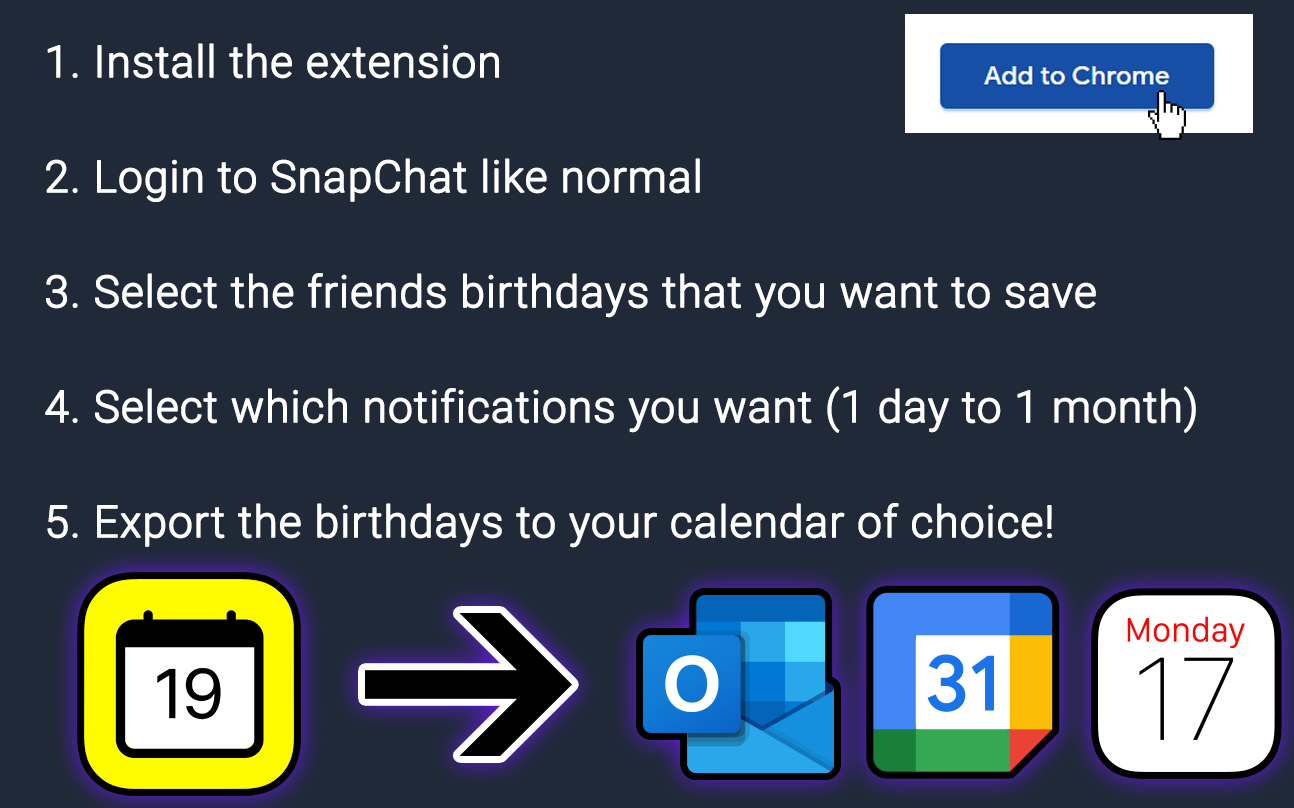
<style>
.page{position:relative;width:1294px;height:808px;background:#1f2937}
.page>*{position:absolute;margin:0}
.t1{font:44px/115px "Roboto-Light";color:#ffffff;font-weight:bold}
</style>
<div class="page">
<p class="t1" style="left:45px;top:43px;width:1151px;height:505px">1. Install the extension<br>2. Login to SnapChat like normal<br>3. Select the friends birthdays that you want to save<br>4. Select which notifications you want (1 day to 1 month)<br>5. Export the birthdays to your calendar of choice!</p>
</div>
